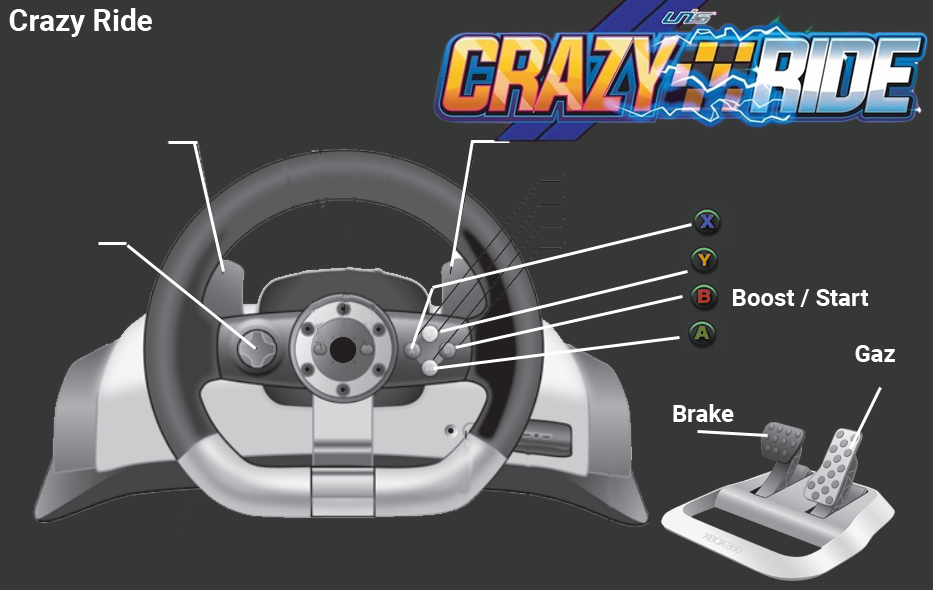
<style>
.page{position:relative;width:933px;height:590px;background:#363838}
.page>*{position:absolute;margin:0}
.t1{font:30px "Roboto-Bold";color:#ffffff}
.t2{font:24px "Roboto-Bold";color:#ffffff}
</style>
<div class="page">
<p class="t1" style="left:9px;top:8px;width:143px;height:29px">Crazy Ride</p>
<p class="t2" style="left:733px;top:289px;width:136px;height:18px">Boost / Start</p>
<p class="t2" style="left:855px;top:345px;width:40px;height:17px">Gaz</p>
<p class="t2" style="left:673px;top:404px;width:61px;height:18px">Brake</p>
</div>
